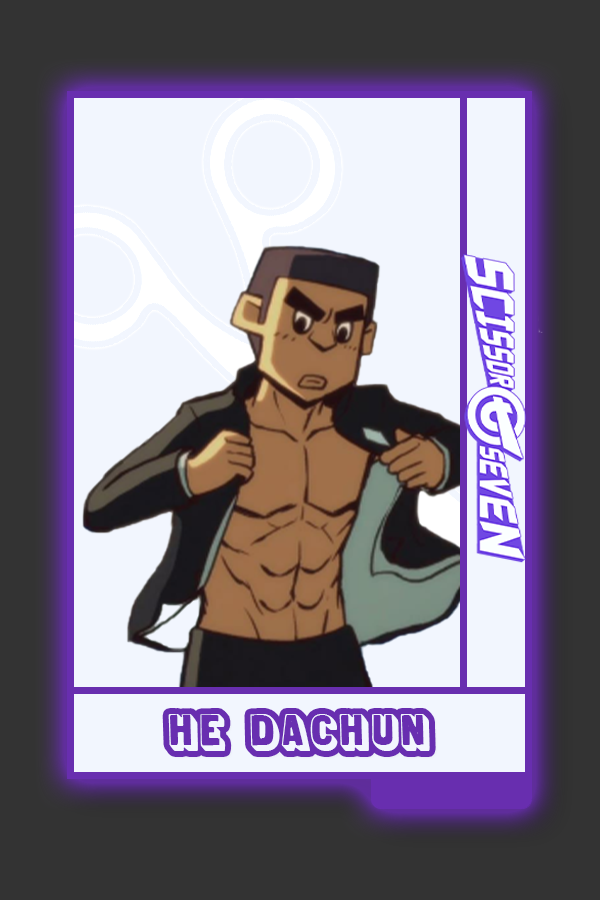
<style>
.page{position:relative;width:600px;height:900px;background:#f2f6fe}
.page>*{position:absolute;margin:0}
.t1{font:46.7px "Lunch";color:#f2f6fe}
</style>
<div class="page">
<p class="t1" style="left:168px;top:714px;width:262px;height:37px">he dachun</p>
</div>
